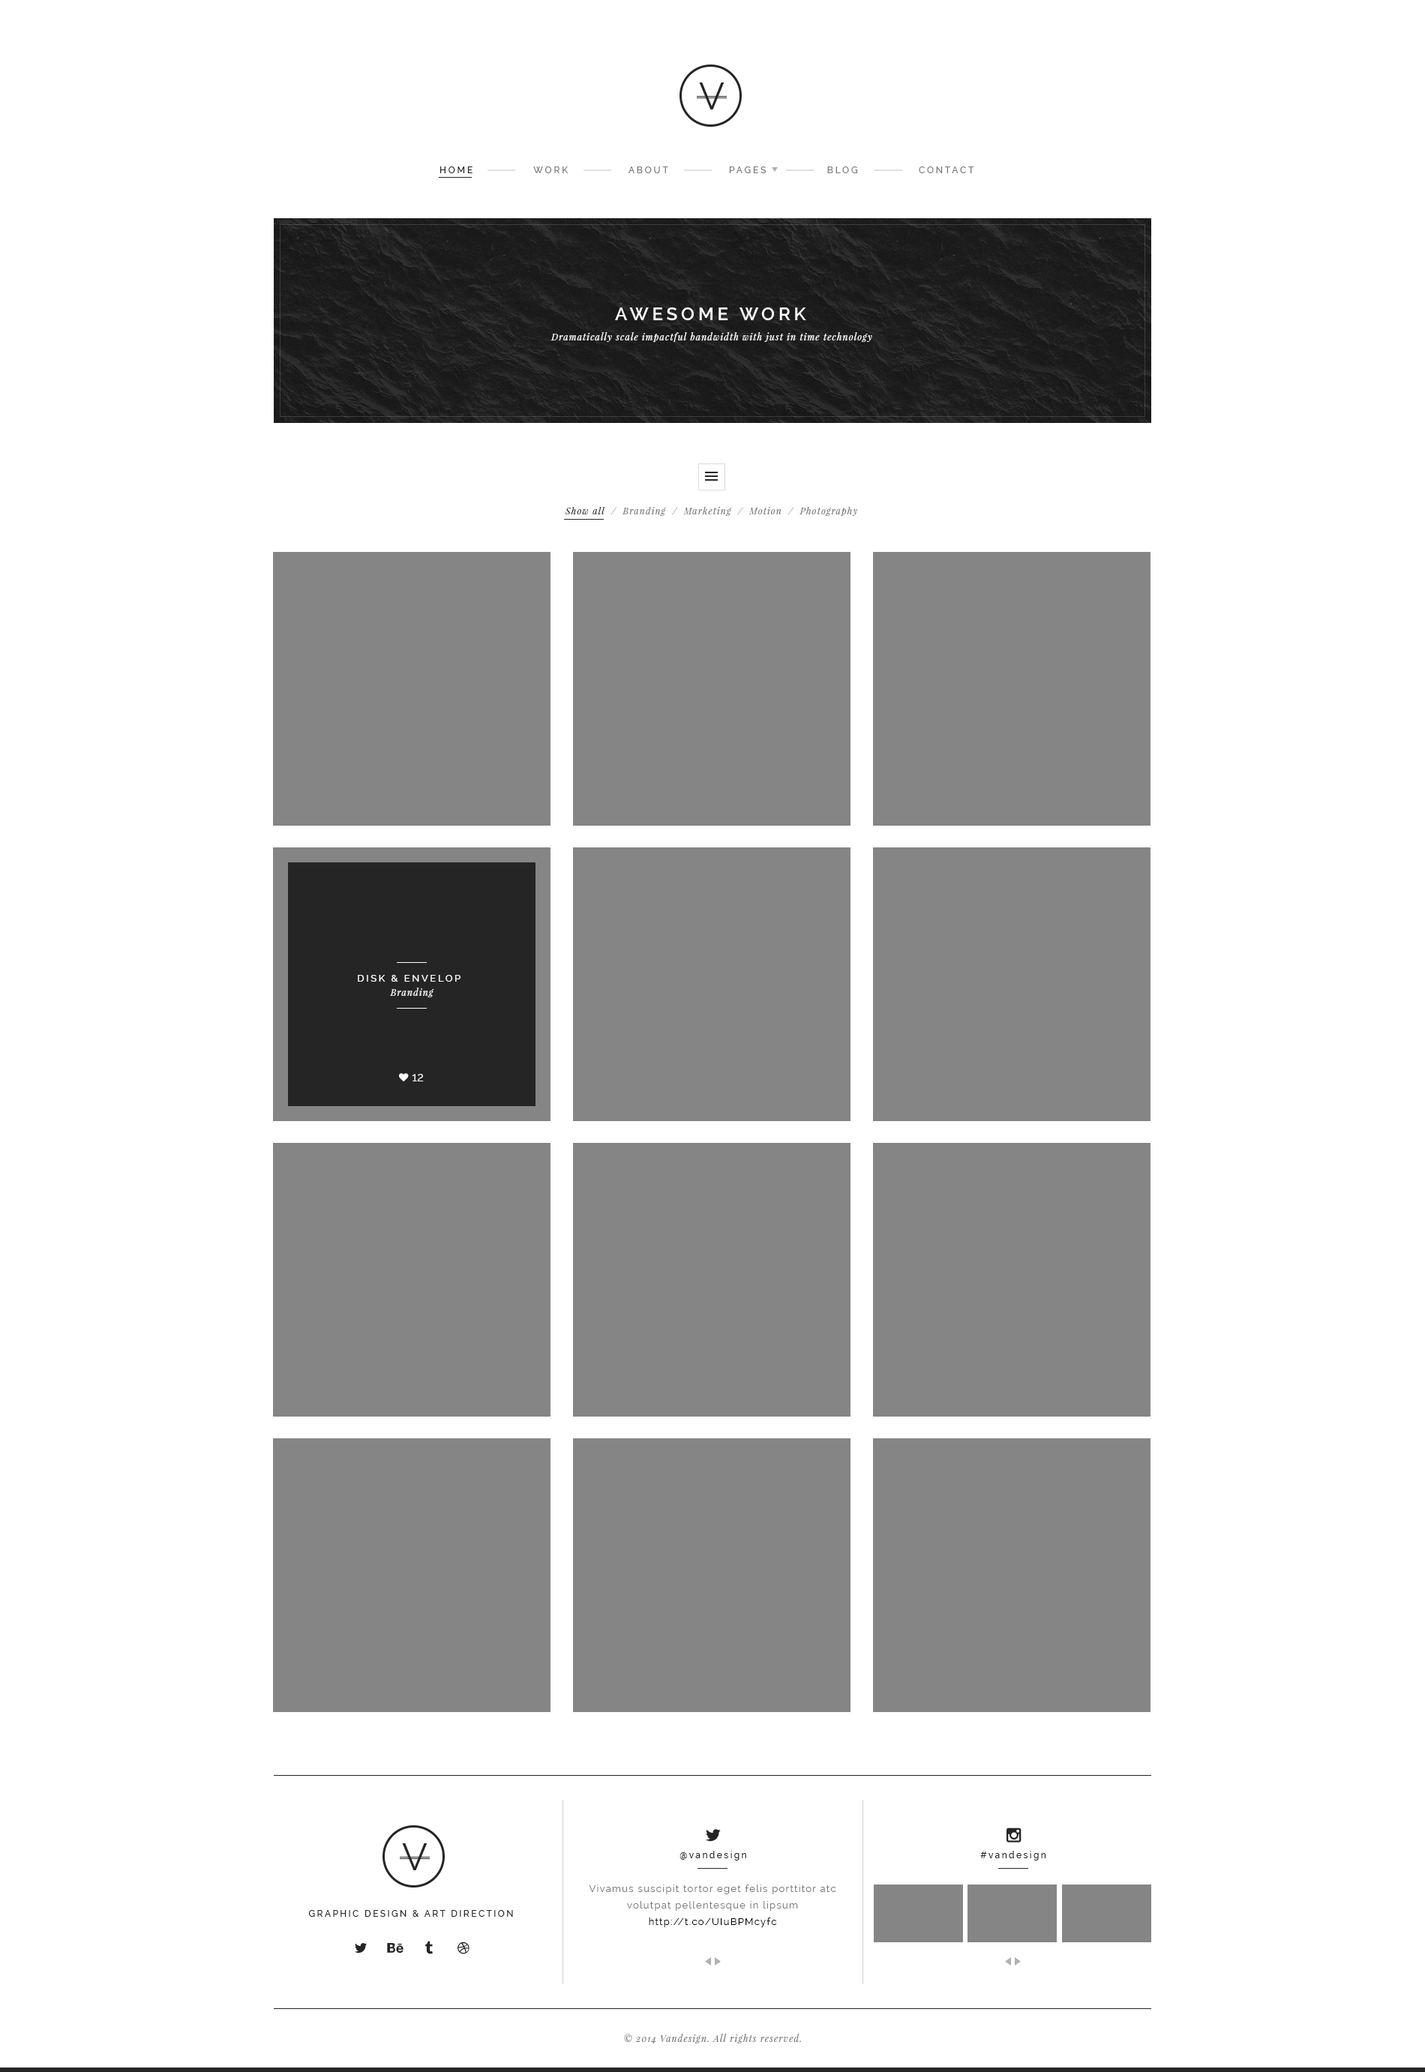
<style>
.page{position:relative;width:1425px;height:2072px;background:#ffffff}
.page>*{position:absolute;margin:0}
.t1{font:9px "Raleway-Medium";letter-spacing:0.2em;color:#7a7a7a;text-transform:uppercase;scale:1.04 1}
.t2{font:9px "Raleway-Medium";letter-spacing:0.2em;color:#252525;text-transform:uppercase;scale:1.04 1}
.t3{font:18px "Raleway-SemiBold";letter-spacing:0.2em;color:#ffffff;text-transform:uppercase}
.t4{font:9px "PlayfairDisplay-Italic";letter-spacing:0.1em;color:#ffffff}
.t5{font:8.9px "PlayfairDisplay-Italic";letter-spacing:0.1em;color:#7a7a7a}
.t6{font:8.9px "PlayfairDisplay-Italic";letter-spacing:0.1em;color:#252525}
.t7{font:9.7px "Raleway-Medium";letter-spacing:0.2em;color:#ffffff;text-transform:uppercase}
.t8{font:12px "Raleway";color:#ffffff;text-transform:uppercase}
.t9{font:9px "Raleway-Medium";letter-spacing:0.2em;color:#252525}
.t10{font:9.7px/16.5px "Raleway";letter-spacing:0.1em;color:#7a7a7a}
.t11{font:9.7px/16.5px "Raleway";letter-spacing:0.1em;color:#000000}
.t12{font:9px "Raleway-Medium";letter-spacing:0.2em;color:#252525;text-transform:uppercase}
.t13{font:9px "PlayfairDisplay-Italic";letter-spacing:0.1em;color:#7a7a7a}
</style>
<div class="page">
<p class="t1" style="left:439px;top:166px;width:535px;height:7px"><span class="t2">HOME              </span>Work              About              Pages              Blog              Contact</p>
<p class="t3" style="left:615px;top:307px;width:191px;height:13px">AWESOME WORK</p>
<p class="t4" style="left:550px;top:332px;width:322px;height:10px">Dramatically scale impactful bandwidth with just in time technology</p>
<p class="t5" style="left:565px;top:507px;width:293px;height:9px"><span class="t6">Show all </span> /  Branding  /  Marketing  /  Motion  /  Photography</p>
<p class="t7" style="left:358px;top:975px;width:102px;height:7px">DISK &amp; ENVELOP</p>
<p class="t4" style="left:390px;top:988px;width:44px;height:9px">Branding</p>
<p class="t8" style="left:412px;top:1074px;width:12px;height:7px">12</p>
<p class="t9" style="left:679px;top:1851px;width:67px;height:10px">@vandesign</p>
<p class="t9" style="left:980px;top:1851px;width:66px;height:10px">#vandesign</p>
<p class="t10" style="left:589px;top:1885px;width:247px;height:42px;text-align:center">Vivamus suscipit tortor eget felis porttitor atc <br>volutpat pellentesque in lipsum<br><span class="t11">http://t.co/UIuBPMcyfc</span></p>
<p class="t12" style="left:308px;top:1910px;width:205px;height:7px">Graphic Design &amp; Art Direction</p>
<p class="t13" style="left:624px;top:2034px;width:177px;height:10px">© 2014 Vandesign. All rights reserved.</p>
</div>
